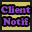
<style>
.page{position:relative;width:32px;height:32px;background:#d2c461}
.page>*{position:absolute;margin:0}
.t1{font:9px "CooperBlackStd";color:#8b47bb}
</style>
<div class="page">
<p class="t1" style="left:1px;top:6px;width:30px;height:7px">Client</p>
<p class="t1" style="left:3px;top:18px;width:26px;height:7px">Notif</p>
</div>
